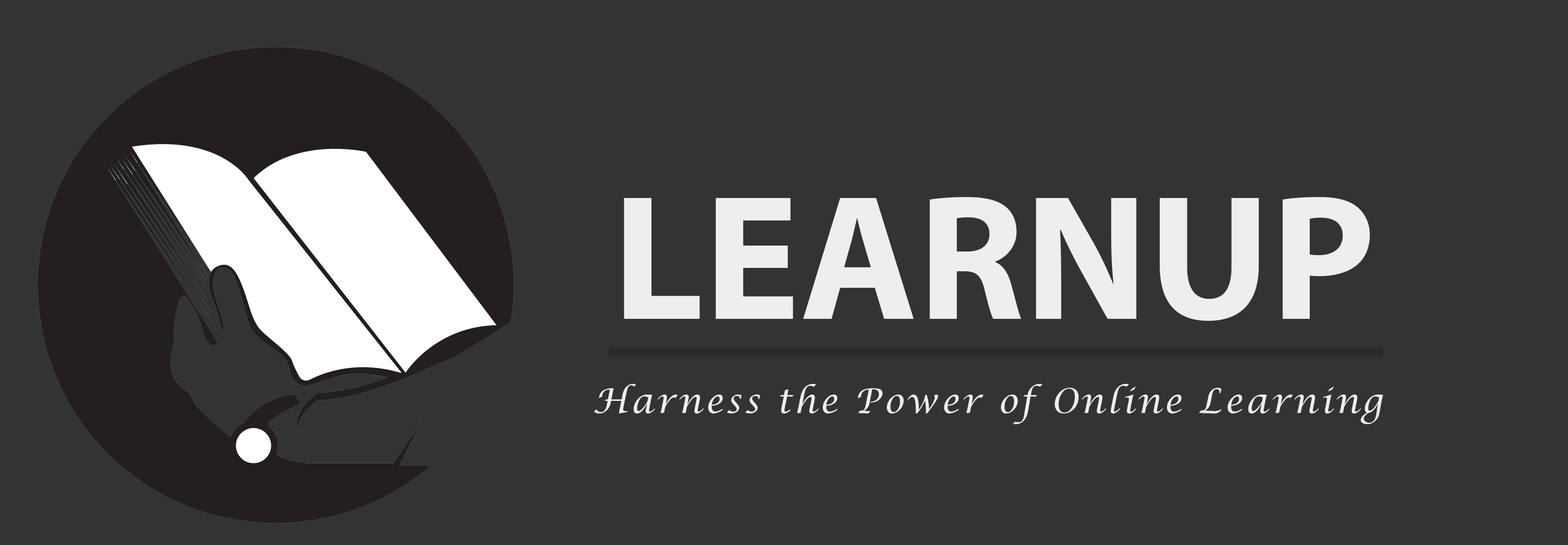
<style>
.page{position:relative;width:1568px;height:545px;background:#333333}
.page>*{position:absolute;margin:0}
.t1{font:179.6px "MyriadPro-Bold";color:#eeeeee}
.t2{font:34px "LucidaCalligraphy-Italic";letter-spacing:0.08em;color:#eeeeee}
</style>
<div class="page">
<p class="t1" style="left:624px;top:197px;width:746px;height:124px">LEARNUP</p>
<p class="t2" style="left:594px;top:384px;width:789px;height:40px">Harness the Power of Online Learning</p>
</div>
